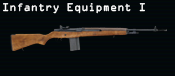
<style>
.page{position:relative;width:175px;height:76px;background:#030709}
.page>*{position:absolute;margin:0}
.t1{font:10px "OCRABeckerRUS-LAT";color:#ffffff}
</style>
<div class="page">
<p class="t1" style="left:3px;top:3px;width:142px;height:11px">Infantry Equipment I</p>
</div>
